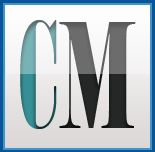
<style>
.page{position:relative;width:155px;height:152px}
.page>*{position:absolute;margin:0}
.t1{font:146px "Onyx"}
.t2{font:146.1px "Elephant-Regular";scale:0.49 1}
</style>
<div class="page">
<p class="t1" style="left:20px;top:20px;width:37px;height:109px">C</p>
<p class="t2" style="left:59px;top:22px;width:77px;height:106px">M</p>
</div>
